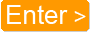
<style>
.page{position:relative;width:90px;height:32px;background:#ff9900}
.page>*{position:absolute;margin:0}
.t1{font:26px "ArialMT";color:#ffffff}
.t2{font:22px "ArialMT";color:#ffffff}
</style>
<div class="page">
<p class="t1" style="left:7px;top:5px;width:79px;height:19px">Enter <span class="t2">&gt;</span></p>
</div>
